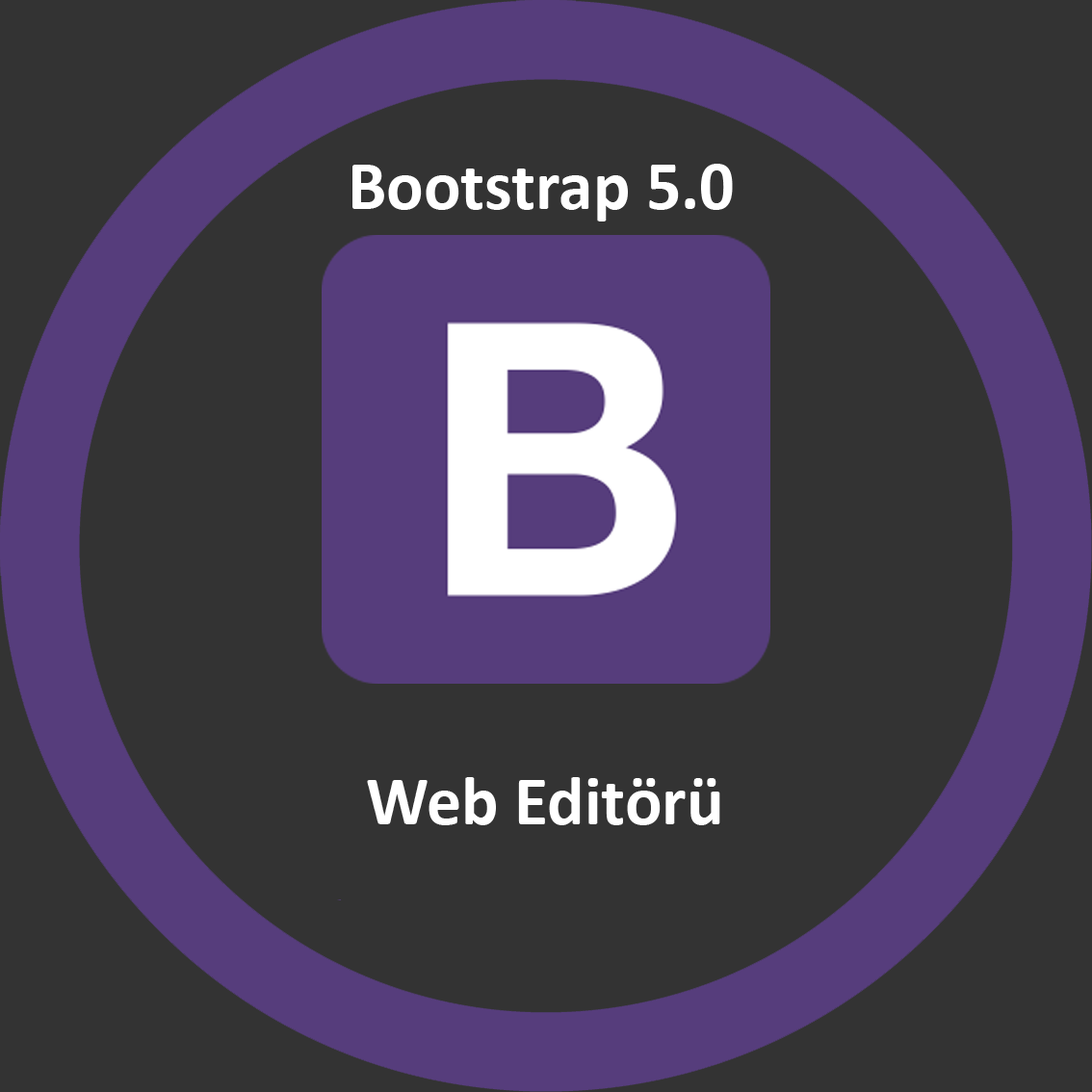
<style>
.page{position:relative;width:1092px;height:1092px;background:#333333}
.page>*{position:absolute;margin:0}
.t1{font:69.3px "Calibri-Bold";color:#ffffff}
</style>
<div class="page">
<p class="t1" style="left:352px;top:164px;width:381px;height:57px">Bootstrap 5.0</p>
<p class="t1" style="left:367px;top:777px;width:353px;height:48px">Web Editörü</p>
</div>
